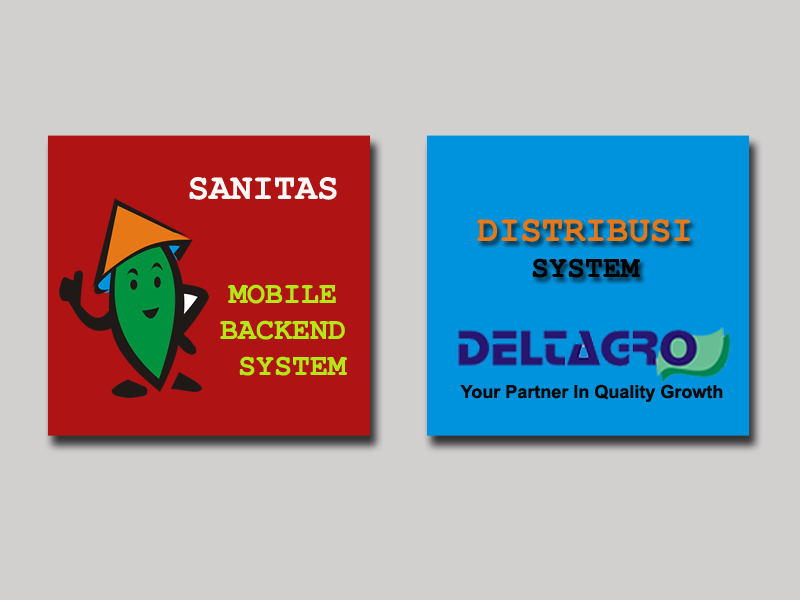
<style>
.page{position:relative;width:800px;height:600px;background:#d2cfcf}
.page>*{position:absolute;margin:0}
.t1{font:36px "CourierNewPS-BoldMT";color:#fcfaf8}
.t2{font:36px "CourierNewPS-BoldMT";color:#e77817}
.t3{font:30px "CourierNewPS-BoldMT";color:#000000}
.t4{font:30px "CourierNewPS-BoldMT";color:#b4e717}
.t5{font:18px "Arial-BoldMT";color:#080808}
</style>
<div class="page">
<p class="t1" style="left:189px;top:177px;width:148px;height:23px">SANITAS</p>
<p class="t2" style="left:477px;top:219px;width:214px;height:59px;text-align:center">DISTRIBUSI<br><span class="t3">SYSTEM</span></p>
<p class="t4" style="left:220px;top:284px;width:127px;height:92px;text-align:center">MOBILE <br>BACKEND <br>SYSTEM</p>
<p class="t5" style="left:460px;top:384px;width:263px;height:18px">Your Partner In Quality Growth</p>
</div>
